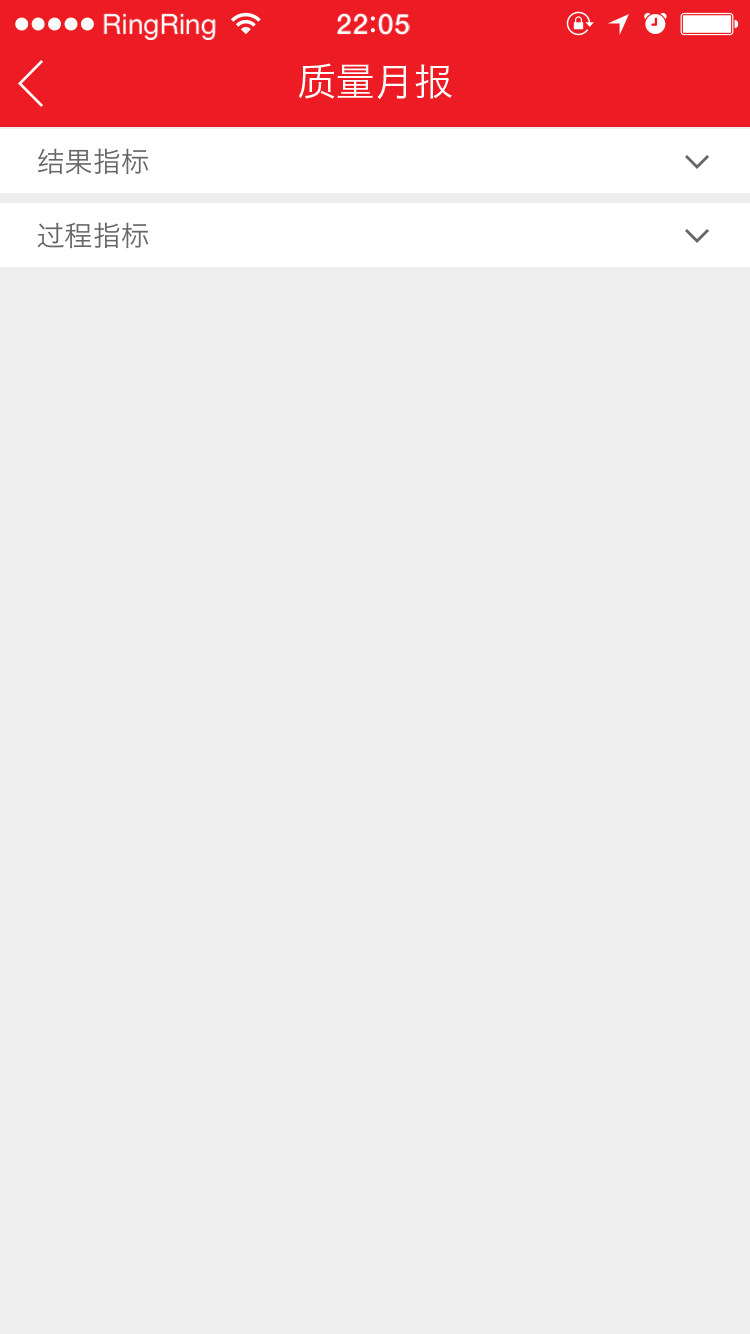
<style>
.page{position:relative;width:750px;height:1334px;background:#eeeeee}
.page>*{position:absolute;margin:0}
.t1{font:28.1px "HelveticaNeue";color:#ffffff}
.t2{font:28.1px "HelveticaNeue-Medium";letter-spacing:0.03em;color:#ffffff}
.t3{font:38.7px "HiraginoSansGB-W3";letter-spacing:0.01em;color:#ffffff}
.t4{font:28px "HiraginoSansGB-W3";letter-spacing:0.01em;color:#666666}
</style>
<div class="page">
<p class="t1" style="left:103px;top:13px;width:113px;height:27px">RingRing</p>
<p class="t2" style="left:337px;top:13px;width:73px;height:22px">22 05</p>
<p class="t3" style="left:298px;top:63px;width:154px;height:36px">质量月报</p>
<p class="t4" style="left:38px;top:148px;width:111px;height:27px">结果指标</p>
<p class="t4" style="left:37px;top:222px;width:112px;height:27px">过程指标</p>
</div>
